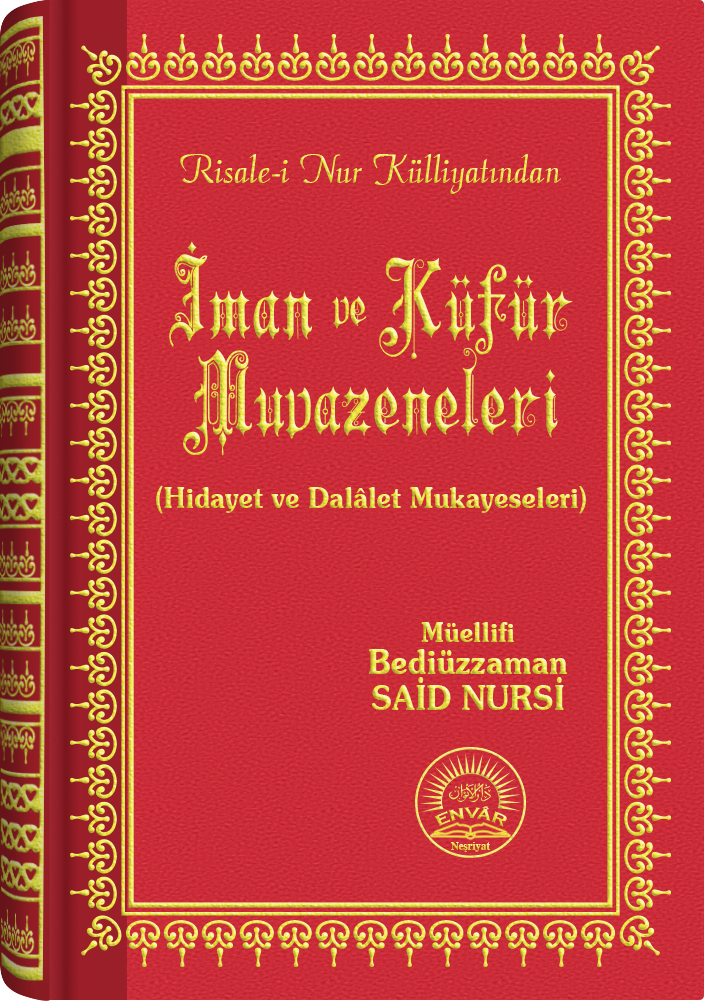
<style>
.page{position:relative;width:704px;height:1001px}
.page>*{position:absolute;margin:0}
.t1{font:45.3px "Barla © 072 Aria ScriptScriptSSi";scale:0.94 1}
.t2{font:108.4px/96.7px "Barla © 001 Liva Nur";letter-spacing:-0.001em;scale:0.92 1}
.t3{font:68.4px/96.7px "Barla © 001 Liva Nur";letter-spacing:-0.001em;scale:0.92 1}
.t4{font:28.3px "SouvenirITCbyBT-Demi";scale:0.94 1}
.t5{font:33.4px/32.4px "SouvenirITCbyBT-Demi";scale:0.93 1}
.t6{font:27.4px/24.4px "SouvenirITCbyBT-Demi";scale:0.93 1}
.t7{font:33.4px/36.4px "SouvenirITCbyBT-Demi";scale:0.93 1}
.t8{font:15.6px "CopperplateGothic-Bold"}
.t9{font:11.2px "Times-Bold";scale:0.96 1}
</style>
<div class="page">
<p class="t1" style="left:180px;top:154px;width:381px;height:40px">Risale-i Nur Külliyatından</p>
<p class="t2" style="left:169px;top:241px;width:404px;height:215px;text-align:center">İman <span class="t3">ve </span>Küfür<br>Muvazeneleri</p>
<p class="t4" style="left:156px;top:485px;width:430px;height:29px">(Hidayet ve Dalâlet Mukayeseleri)</p>
<p class="t5" style="left:369px;top:622px;width:198px;height:88px;text-align:center"><span class="t6">Müellifi<br></span>Bediüzzaman<br><span class="t7">SAİD NURSİ</span></p>
<p class="t8" style="left:434px;top:806px;width:73px;height:21px">ENVÂR</p>
<p class="t9" style="left:451px;top:842px;width:39px;height:10px">Neşriyat</p>
</div>
